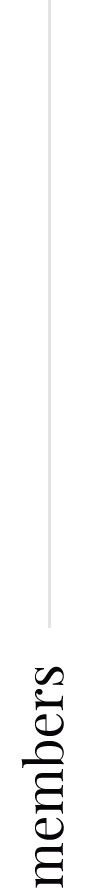
<style>
.page{position:relative;width:100px;height:888px;background:#ffffff}
.page>*{position:absolute;margin:0}
.t1{font:53px "PlayfairDisplay-Regular";color:#070508}
</style>
<div class="page">
<p class="t1" style="left:21px;top:666px;width:43px;height:222px;rotate:-90deg">members</p>
</div>
